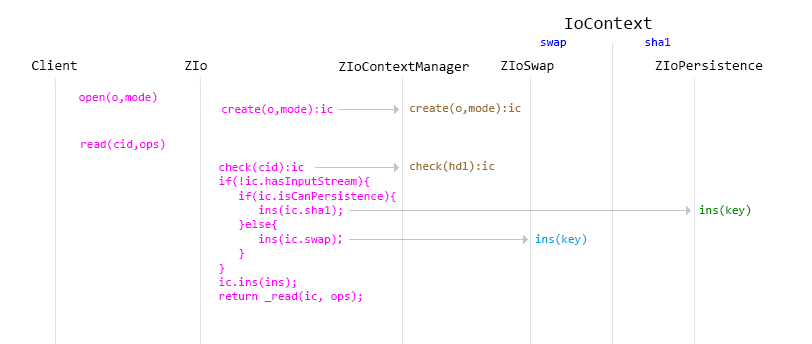
<style>
.page{position:relative;width:812px;height:344px;background:#ffffff}
.page>*{position:absolute;margin:0}
.t1{font:18px "Consolas";color:#000000}
.t2{font:12px "Consolas";color:#0000ff}
.t3{font:14px "Consolas";color:#000000}
.t4{font:12px "Consolas";color:#ff00ff}
.t5{font:12px "Consolas";color:#996c33}
.t6{font:12px "AdobeHeitiStd-Regular";color:#ff00ff}
.t7{font:12px "Consolas";color:#008800}
.t8{font:12px "Consolas";color:#00a0e9}
</style>
<div class="page">
<p class="t1" style="left:565px;top:17px;width:87px;height:12px">IoContext</p>
<p class="t2" style="left:541px;top:40px;width:25px;height:8px">swap</p>
<p class="t2" style="left:645px;top:38px;width:26px;height:8px">sha1</p>
<p class="t3" style="left:32px;top:60px;width:45px;height:10px">Client</p>
<p class="t3" style="left:185px;top:61px;width:22px;height:9px">ZIo</p>
<p class="t3" style="left:339px;top:62px;width:130px;height:12px">ZIoContextManager</p>
<p class="t3" style="left:501px;top:61px;width:53px;height:12px">ZIoSwap</p>
<p class="t3" style="left:655px;top:60px;width:108px;height:10px">ZIoPersistence</p>
<p class="t4" style="left:79px;top:92px;width:78px;height:11px">open(o,mode)</p>
<p class="t4" style="left:222px;top:104px;width:111px;height:11px">create(o,mode):ic</p>
<p class="t5" style="left:410px;top:103px;width:111px;height:69px">create(o,mode):ic<br><br><br><br>check(hdl):ic</p>
<p class="t4" style="left:81px;top:139px;width:84px;height:11px">read(cid,ops)</p>
<p class="t4" style="left:219px;top:162px;width:177px;height:140px">check(cid):ic<br>if(!ic.hasInputStream){<br>   if(ic.isCanPersistence){<br>      ins(ic.sha1);<br>   }else{<br>      ins(ic.swap)<span class="t6">；</span><br>   }<br>}<br>ic.ins(ins);<br>return _read(ic, ops);</p>
<p class="t7" style="left:699px;top:205px;width:52px;height:11px">ins(key)</p>
<p class="t8" style="left:535px;top:234px;width:52px;height:11px">ins(key)</p>
</div>
